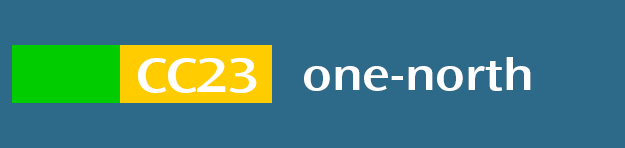
<style>
.page{position:relative;width:625px;height:148px;background:#2d6a89}
.page>*{position:absolute;margin:0}
.t1{font:50px "OceanSansStd-SemiboldExt";color:#ffffff}
.t2{font:45.8px "OceanSansStd-SemiboldExt";color:#ffffff}
</style>
<div class="page">
<p class="t1" style="left:138px;top:58px;width:119px;height:35px">CC23</p>
<p class="t2" style="left:304px;top:57px;width:227px;height:34px">one-north</p>
</div>
